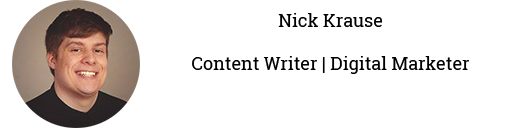
<style>
.page{position:relative;width:512px;height:128px;background:#ffffff}
.page>*{position:absolute;margin:0}
.t1{font:18px "RobotoSlab-Regular";color:#000000}
</style>
<div class="page">
<p class="t1" style="left:192px;top:13px;width:277px;height:61px;text-align:center">Nick Krause<br><br>Content Writer | Digital Marketer</p>
</div>
